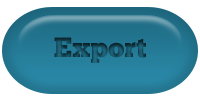
<style>
.page{position:relative;width:200px;height:100px;background:#ffffff}
.page>*{position:absolute;margin:0}
.t1{font:28.1px "ChunkFiveEx"}
</style>
<div class="page">
<p class="t1" style="left:54px;top:37px;width:92px;height:26px">Export</p>
</div>
